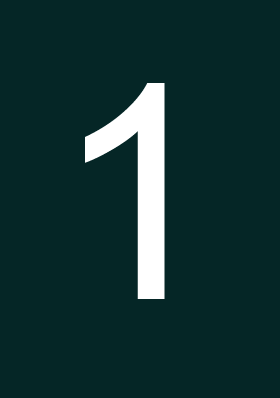
<style>
.page{position:relative;width:280px;height:398px;background:#052626}
.page>*{position:absolute;margin:0}
.t1{font:300px "ArialMT";color:#ffffff}
</style>
<div class="page">
<p class="t1" style="left:85px;top:83px;width:80px;height:216px">1</p>
</div>
